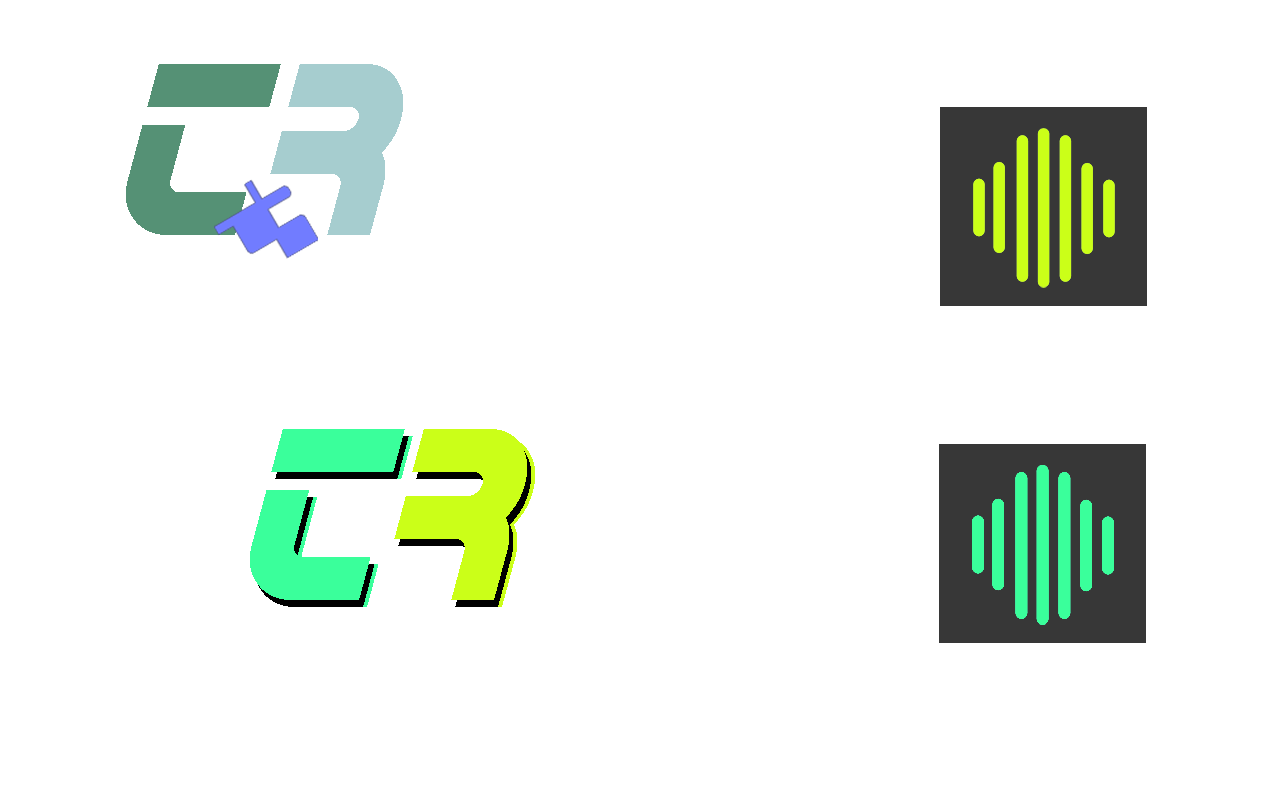
<style>
.page{position:relative;width:1280px;height:800px;background:#ffffff}
.page>*{position:absolute;margin:0}
.t1{font:250px "Horizon-Italic";color:#559175}
.t2{font:250px "Horizon-Italic";color:#a6cdcf}
.t3{font:250px "Horizon-Italic";color:#3aff9b}
.t4{font:250px "Horizon-Italic";color:#cbff18}
</style>
<div class="page">
<p class="t1" style="left:126px;top:64px;width:155px;height:171px">t</p>
<p class="t2" style="left:270px;top:64px;width:133px;height:171px">r</p>
<p class="t3" style="left:250px;top:429px;width:155px;height:171px">t</p>
<p class="t3" style="left:258px;top:436px;width:155px;height:171px">t</p>
<p class="t4" style="left:394px;top:429px;width:133px;height:171px">r</p>
<p class="t4" style="left:402px;top:436px;width:133px;height:171px">r</p>
</div>
